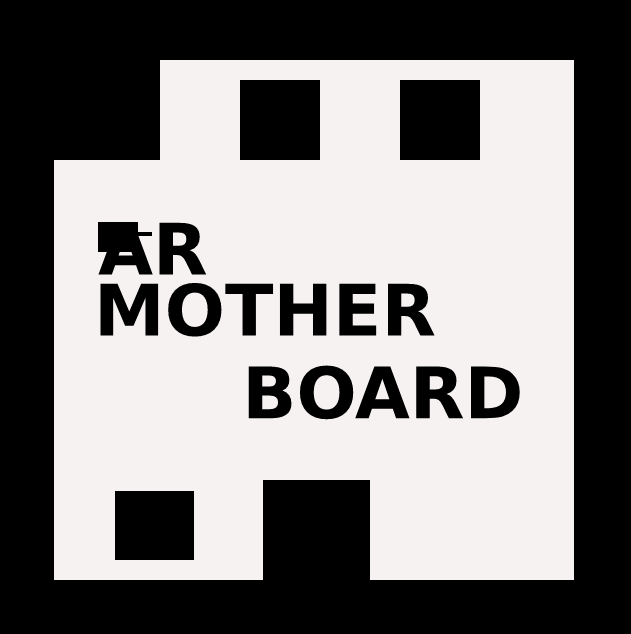
<style>
.page{position:relative;width:631px;height:634px;background:#f7f2f2}
.page>*{position:absolute;margin:0}
.t1{font:71px "DejaVuSans-Bold";color:#000000}
</style>
<div class="page">
<p class="t1" style="left:98px;top:222px;width:109px;height:53px">AR</p>
<p class="t1" style="left:100px;top:282px;width:420px;height:138px">MOTHER<br>      BOARD</p>
</div>
